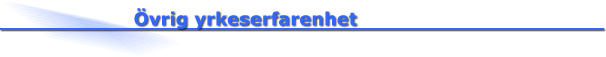
<style>
.page{position:relative;width:606px;height:57px;background:#ffffff}
.page>*{position:absolute;margin:0}
.t1{font:18px "Verdana-Bold";color:#3366ff}
</style>
<div class="page">
<p class="t1" style="left:134px;top:8px;width:223px;height:21px">Övrig yrkeserfarenhet</p>
</div>
